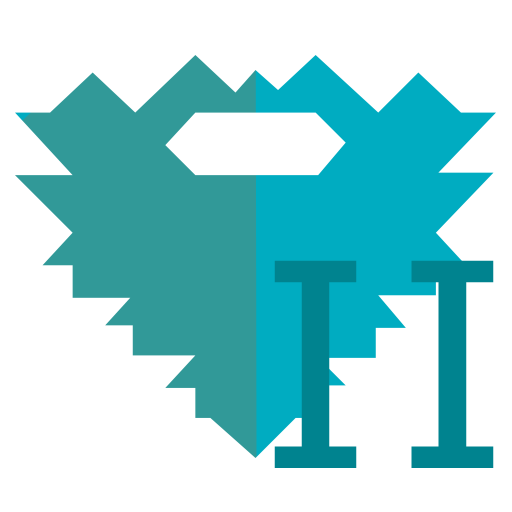
<style>
.page{position:relative;width:512px;height:512px;background:#ffffff}
.page>*{position:absolute;margin:0}
.t1{font:284.6px "Verdana";letter-spacing:0.06em;color:#00838f}
</style>
<div class="page">
<p class="t1" style="left:274px;top:260px;width:220px;height:208px">II</p>
</div>
